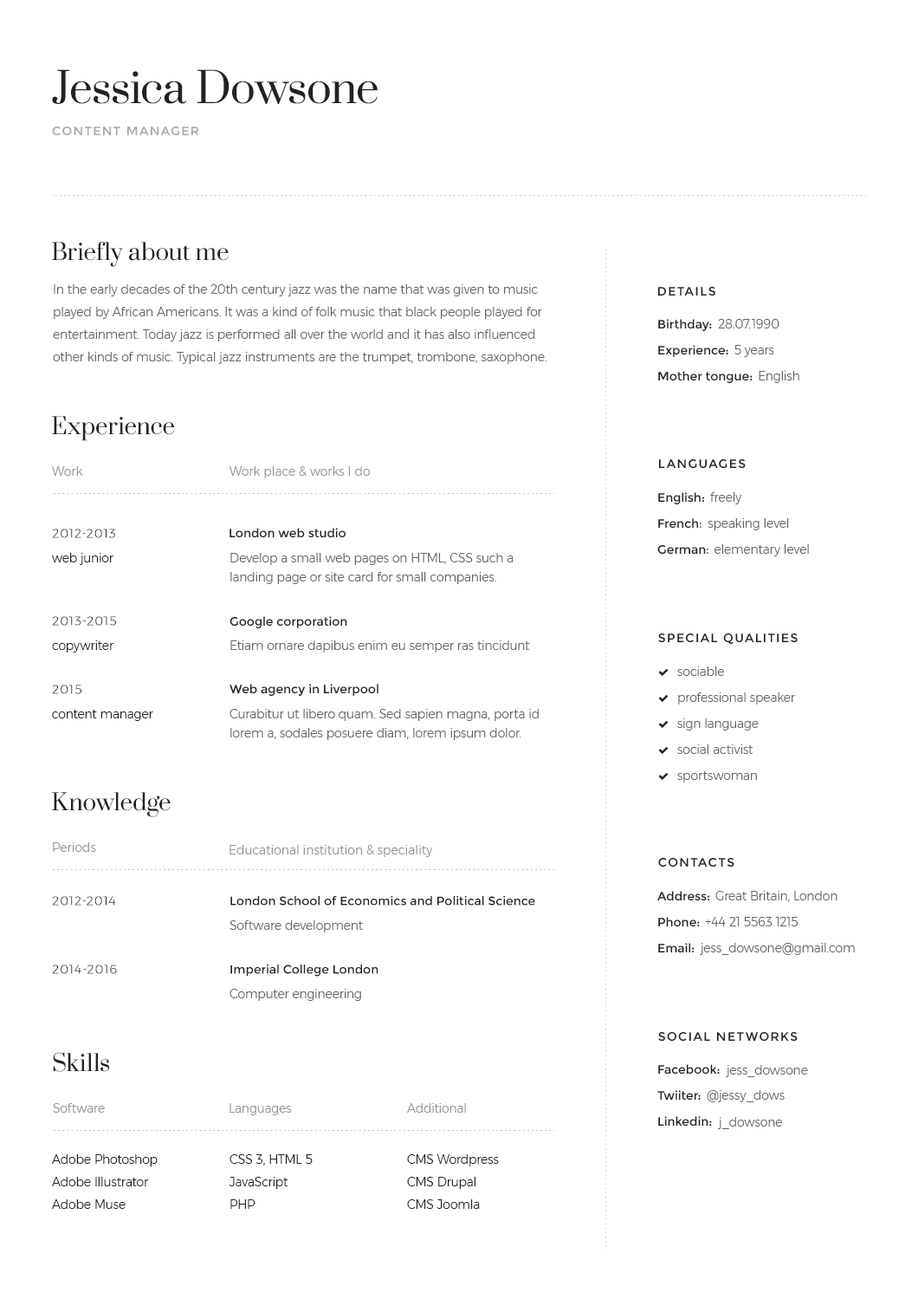
<style>
.page{position:relative;width:918px;height:1299px;background:#ffffff}
.page>*{position:absolute;margin:0}
.t1{font:41.6px "Prata-Regular";color:#222222}
.t2{font:12.1px "Montserrat-Regular";letter-spacing:0.1em;color:#a9a9a9;text-transform:uppercase}
.t3{font:22.5px "Prata-Regular";color:#222222}
.t4{font:12.1px/22.5px "Montserrat-Light";color:#656565}
.t5{font:12.1px "Montserrat-Regular";letter-spacing:0.1em;color:#222222;text-transform:uppercase}
.t6{font:12.1px/26px "Montserrat-Regular";color:#222222}
.t7{font:12.1px "Montserrat-Light";color:#656565}
.t8{font:12.1px "Montserrat-Light";color:#959595}
.t9{font:12.1px/26px "MinionPro-Regular";color:#222222}
.t10{font:12.1px "Montserrat-Light";letter-spacing:0.1em;color:#222222;text-transform:uppercase}
.t11{font:12.1px "Montserrat-Regular";color:#222222}
.t12{font:12.1px "Montserrat-Light";color:#222222}
.t13{font:12.1px/19.1px "Montserrat-Light";color:#656565}
.t14{font:12.1px/26px "Montserrat-Light";color:#656565}
.t15{font:12.1px/22.5px "Montserrat-Light";color:#222222}
</style>
<div class="page">
<p class="t1" style="left:52px;top:69px;width:326px;height:35px">Jessica Dowsone</p>
<p class="t2" style="left:52px;top:126px;width:147px;height:10px">content manager</p>
<p class="t3" style="left:52px;top:242px;width:177px;height:25px">Briefly about me</p>
<p class="t4" style="left:53px;top:284px;width:494px;height:80px">In the early decades of the 20th century jazz was the name that was given to music played by African Americans. It was a kind of folk music that black people played for entertainment. Today jazz is performed all over the world and it has also influenced other kinds of music. Typical jazz instruments are the trumpet, trombone, saxophone.<br><br>The features of jazz are its sound and rhythms. Jazz is improvised music that shows strong emotions and feelings.</p>
<p class="t5" style="left:658px;top:286px;width:58px;height:10px">Details</p>
<p class="t6" style="left:658px;top:319px;width:95px;height:65px">Birthday:<br>Experience:<br>Mother tongue:</p>
<p class="t7" style="left:718px;top:319px;width:62px;height:9px">28.07.1990</p>
<p class="t7" style="left:735px;top:345px;width:39px;height:12px">5 years</p>
<p class="t7" style="left:759px;top:371px;width:41px;height:12px">English</p>
<p class="t3" style="left:52px;top:416px;width:122px;height:25px">Experience</p>
<p class="t5" style="left:658px;top:458px;width:88px;height:11px">Languages</p>
<p class="t8" style="left:52px;top:466px;width:31px;height:10px">Work</p>
<p class="t8" style="left:230px;top:466px;width:141px;height:12px">Work place &amp; works I do</p>
<p class="t6" style="left:658px;top:492px;width:51px;height:62px">English:<br>French<span class="t9">:<br></span>German<span class="t9">:</span></p>
<p class="t7" style="left:710px;top:492px;width:32px;height:12px">freely</p>
<p class="t7" style="left:708px;top:518px;width:81px;height:12px">speaking level</p>
<p class="t10" style="left:52px;top:528px;width:63px;height:10px">2012-2013</p>
<p class="t11" style="left:230px;top:528px;width:117px;height:10px">London web studio</p>
<p class="t7" style="left:715px;top:544px;width:94px;height:12px">elementary level</p>
<p class="t12" style="left:51px;top:553px;width:62px;height:12px">web junior</p>
<p class="t13" style="left:230px;top:553px;width:284px;height:31px">Develop a small web pages on HTML, CSS such a landing page or site card for small companies.</p>
<p class="t10" style="left:52px;top:616px;width:64px;height:9px">2013-2015</p>
<p class="t11" style="left:230px;top:616px;width:117px;height:13px">Google corporation</p>
<p class="t12" style="left:52px;top:640px;width:62px;height:12px">copywriter</p>
<p class="t7" style="left:230px;top:640px;width:300px;height:12px">Etiam ornare dapibus enim eu semper ras tincidunt mollis mauris quis luctus.</p>
<p class="t5" style="left:658px;top:632px;width:140px;height:12px">Special qualities</p>
<p class="t14" style="left:677px;top:666px;width:118px;height:116px">sociable<br>professional speaker<br>sign language<br>social activist<br>sportswoman</p>
<p class="t10" style="left:52px;top:684px;width:29px;height:10px">2015</p>
<p class="t11" style="left:230px;top:684px;width:149px;height:12px">Web agency in Liverpool</p>
<p class="t12" style="left:52px;top:709px;width:101px;height:12px">content manager</p>
<p class="t13" style="left:230px;top:709px;width:309px;height:31px">Curabitur ut libero quam. Sed sapien magna, porta id lorem a, sodales posuere diam, lorem ipsum dolor.</p>
<p class="t3" style="left:52px;top:792px;width:119px;height:25px">Knowledge</p>
<p class="t8" style="left:53px;top:842px;width:43px;height:10px">Periods</p>
<p class="t8" style="left:230px;top:845px;width:203px;height:12px">Educational institution &amp; speciality</p>
<p class="t5" style="left:658px;top:857px;width:77px;height:10px">Contacts</p>
<p class="t6" style="left:658px;top:891px;width:52px;height:62px">Address:<br>Phone:<br>Email:</p>
<p class="t7" style="left:716px;top:891px;width:122px;height:11px">Great Britain, London</p>
<p class="t10" style="left:52px;top:896px;width:64px;height:9px">2012-2014</p>
<p class="t11" style="left:230px;top:895px;width:305px;height:10px">London School of Economics and Political Science</p>
<p class="t7" style="left:705px;top:917px;width:94px;height:9px">+44 21 5563 1215</p>
<p class="t7" style="left:230px;top:920px;width:133px;height:12px">Software development</p>
<p class="t7" style="left:700px;top:943px;width:155px;height:12px">jess_dowsone@gmail.com</p>
<p class="t10" style="left:52px;top:964px;width:65px;height:10px">2014-2016</p>
<p class="t11" style="left:230px;top:963px;width:149px;height:13px">Imperial College London</p>
<p class="t7" style="left:230px;top:988px;width:131px;height:13px">Computer engineering</p>
<p class="t5" style="left:658px;top:1031px;width:140px;height:10px">Social networks</p>
<p class="t3" style="left:53px;top:1052px;width:57px;height:20px">Skills</p>
<p class="t6" style="left:658px;top:1064px;width:62px;height:62px">Facebook:<br>Twiiter:<br>Linkedin:</p>
<p class="t7" style="left:726px;top:1065px;width:82px;height:12px">jess_dowsone</p>
<p class="t7" style="left:707px;top:1090px;width:78px;height:12px">@jessy_dows</p>
<p class="t8" style="left:53px;top:1103px;width:52px;height:9px">Software</p>
<p class="t8" style="left:230px;top:1103px;width:62px;height:12px">Languages</p>
<p class="t8" style="left:406px;top:1103px;width:60px;height:9px">Additional</p>
<p class="t7" style="left:718px;top:1117px;width:64px;height:12px">j_dowsone</p>
<p class="t15" style="left:51px;top:1154px;width:107px;height:54px">Adobe Photoshop<br>Adobe Illustrator<br>Adobe Muse</p>
<p class="t15" style="left:229px;top:1154px;width:84px;height:54px">CSS 3, HTML 5<br>JavaScript<br>PHP</p>
<p class="t15" style="left:407px;top:1154px;width:92px;height:54px">CMS Wordpress<br>CMS Drupal<br>CMS Joomla</p>
</div>
